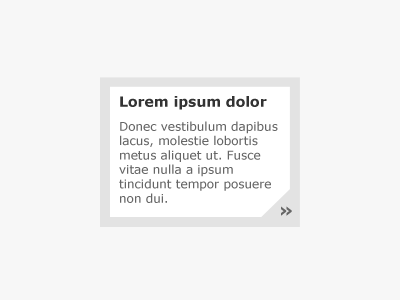
<style>
.page{position:relative;width:400px;height:300px;background:#f7f7f7}
.page>*{position:absolute;margin:0}
.t1{font:12px "Verdana";color:#666666}
.t2{font:14px "Verdana-Bold";color:#333333}
.t3{font:12px/24px "Verdana";color:#666666}
.t4{font:18px "Verdana-Bold";color:#666666;text-transform:uppercase}
</style>
<div class="page">
<p class="t1" style="left:119px;top:96px;width:159px;height:107px"><span class="t2">Lorem ipsum dolor <br></span><span class="t3">Donec vestibulum dapibus </span>lacus, molestie lobortis metus aliquet ut. Fusce vitae nulla a ipsum tincidunt tempor posuere non dui.</p>
<p class="t4" style="left:281px;top:206px;width:11px;height:10px">»</p>
</div>
